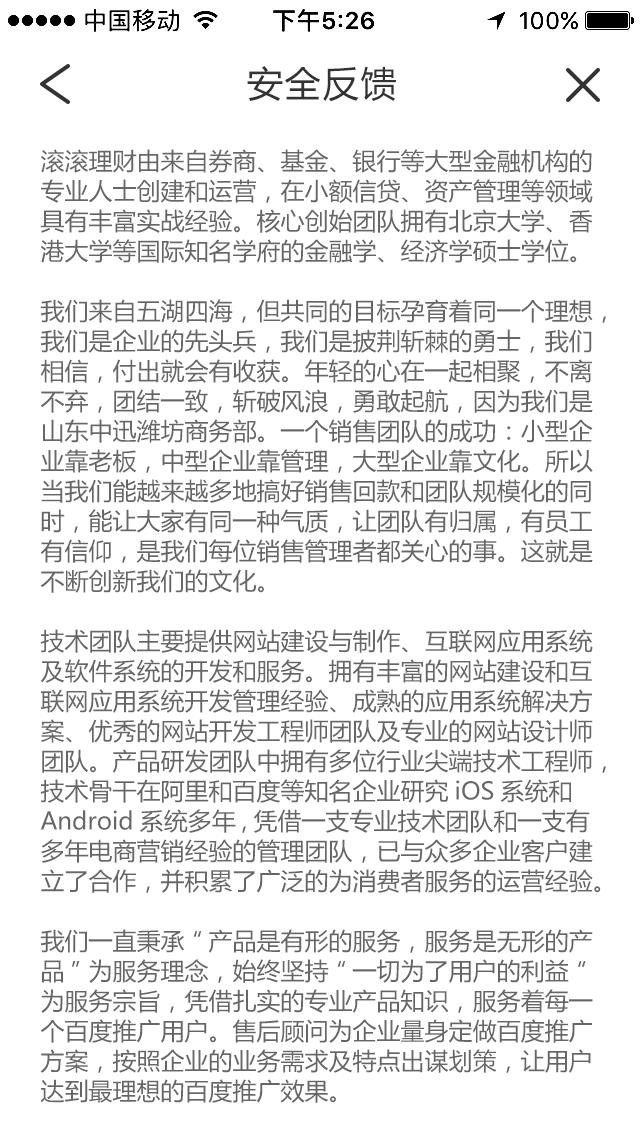
<style>
.page{position:relative;width:640px;height:1136px;background:#ffffff}
.page>*{position:absolute;margin:0}
.t1{font:36px "MicrosoftYaHei";letter-spacing:0.05em;color:#333333}
.t2{font:24px/30px "MicrosoftYaHei";color:#666666}
</style>
<div class="page">
<p class="t1" style="left:247px;top:66px;width:149px;height:36px">安全反馈</p>
<p class="t2" style="left:40px;top:149px;width:566px;height:954px">滚滚理财由来自券商、基金、银行等大型金融机构的<br>专业人士创建和运营，在小额信贷、资产管理等领域<br>具有丰富实战经验。核心创始团队拥有北京大学、香<br>港大学等国际知名学府的金融学、经济学硕士学位。<br><br>我们来自五湖四海，但共同的目标孕育着同一个理想，<br>我们是企业的先头兵，我们是披荆斩棘的勇士，我们<br>相信，付出就会有收获。年轻的心在一起相聚，不离<br>不弃，团结一致，斩破风浪，勇敢起航，因为我们是<br>山东中迅潍坊商务部。一个销售团队的成功：小型企<br>业靠老板，中型企业靠管理，大型企业靠文化。所以<br>当我们能越来越多地搞好销售回款和团队规模化的同<br>时，能让大家有同一种气质，让团队有归属，有员工<br>有信仰，是我们每位销售管理者都关心的事。这就是<br>不断创新我们的文化。<br><br>技术团队主要提供网站建设与制作、互联网应用系统<br>及软件系统的开发和服务。拥有丰富的网站建设和互<br>联网应用系统开发管理经验、成熟的应用系统解决方<br>案、优秀的网站开发工程师团队及专业的网站设计师<br>团队。产品研发团队中拥有多位行业尖端技术工程师， <br>技术骨干在阿里和百度等知名企业研究iOS系统和<br>Android系统多年,凭借一支专业技术团队和一支有<br>多年电商营销经验的管理团队，已与众多企业客户建<br>立了合作，并积累了广泛的为消费者服务的运营经验。<br><br>我们一直秉承“产品是有形的服务，服务是无形的产<br>品”为服务理念，始终坚持“一切为了用户的利益“<br>为服务宗旨，凭借扎实的专业产品知识，服务着每一<br>个百度推广用户。售后顾问为企业量身定做百度推广<br>方案，按照企业的业务需求及特点出谋划策，让用户<br>达到最理想的百度推广效果。</p>
</div>
